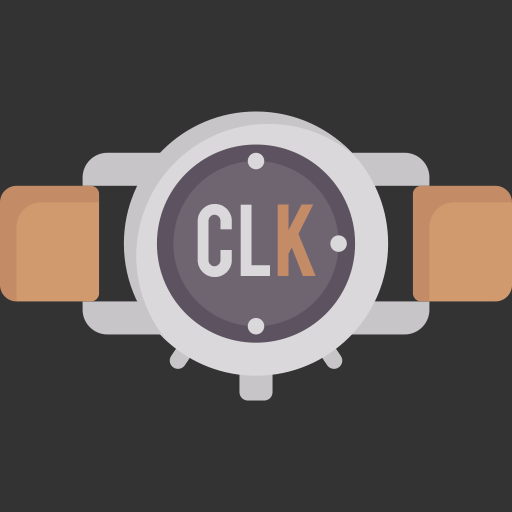
<style>
.page{position:relative;width:512px;height:512px;background:#333333}
.page>*{position:absolute;margin:0}
.t1{font:80px "Bebas";color:#dad8db}
.t2{font:80px "Bebas";color:#c38c66}
</style>
<div class="page">
<p class="t1" style="left:197px;top:204px;width:119px;height:73px">CL<span class="t2">K</span></p>
</div>
